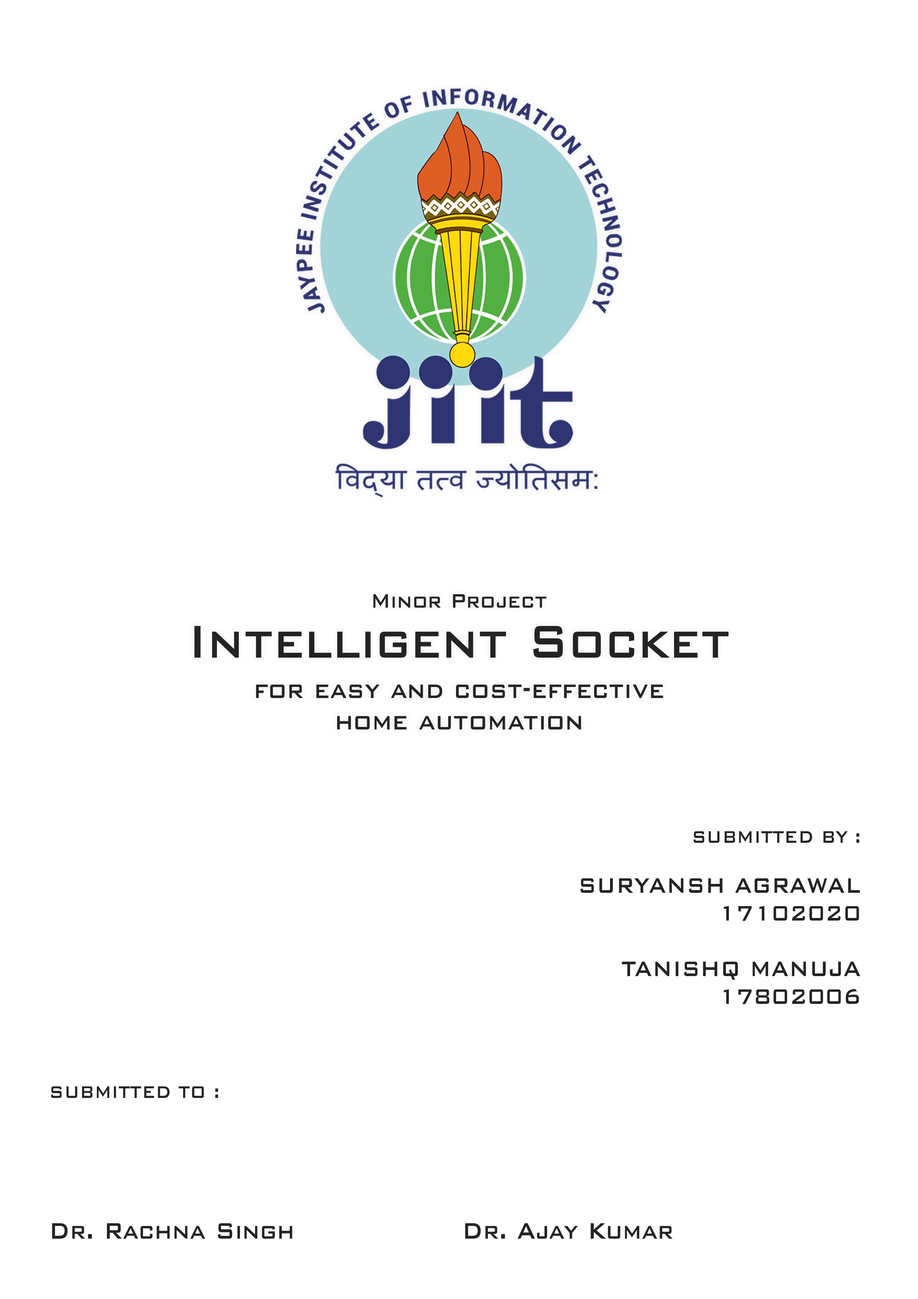
<style>
.page{position:relative;width:918px;height:1299px;background:#ffffff}
.page>*{position:absolute;margin:0}
.t1{font:26.1px "BankGothicBold";color:#232323;scale:0.83 1}
.t2{font:61.6px "BankGothicBold";color:#232323;scale:0.83 1}
.t3{font:31.7px "BankGothicBold";color:#232323;scale:0.83 1}
.t4{font:28px "BankGothicBold";color:#232323;scale:0.83 1}
.t5{font:22.4px "BankGothicBold";color:#232323;scale:0.83 1}
.t6{font:29.9px "BankGothicBold";color:#232323;scale:0.83 1}
</style>
<div class="page">
<p class="t1" style="left:373px;top:594px;width:173px;height:14px">Minor Project</p>
<p class="t2" style="left:194px;top:626px;width:535px;height:32px">Intelligent Socket</p>
<p class="t3" style="left:256px;top:684px;width:407px;height:45px;text-align:center"><span class="t2"><br></span>for easy and cost-effective<br>home automation</p>
<p class="t4" style="left:581px;top:831px;width:279px;height:173px;text-align:right"><span class="t5">SUBMITTED BY :<br><br></span>SURYANSH AGRAWAL<br>17102020<br><br>TANISHQ MANUJA<br>17802006</p>
<p class="t6" style="left:51px;top:1086px;width:622px;height:152px"><span class="t5">SUBMITTED TO :<br><br><br><br><br><br></span>Dr. Rachna Singh             Dr. Ajay Kumar</p>
</div>
